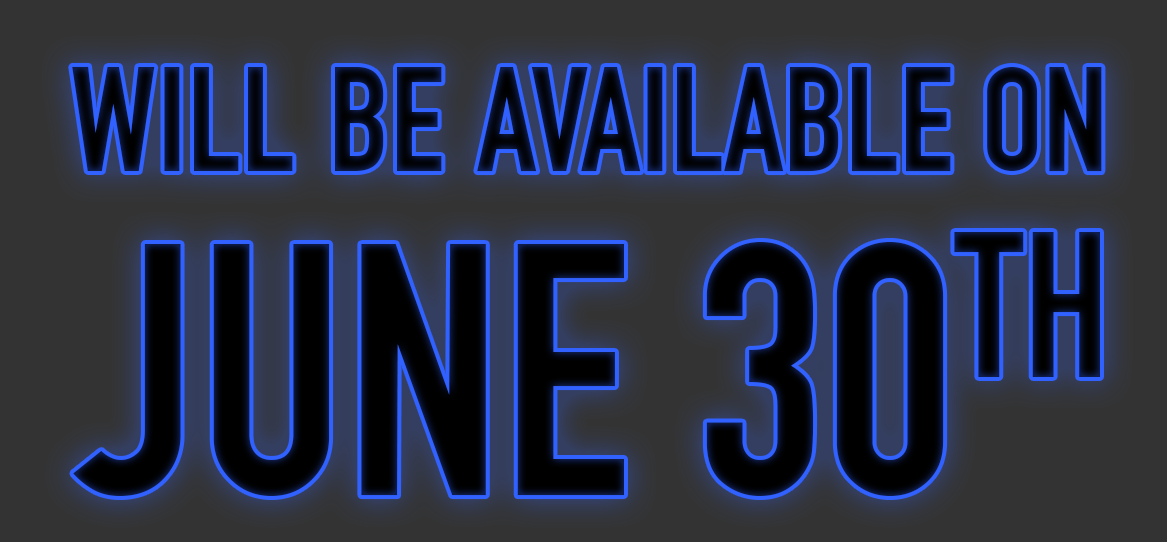
<style>
.page{position:relative;width:1167px;height:542px;background:#333333}
.page>*{position:absolute;margin:0}
.t1{font:145.8px "DINEngschrift";text-transform:uppercase}
.t2{font:350.4px "DINEngschrift";color:#000102;text-transform:uppercase}
</style>
<div class="page">
<p class="t1" style="left:72px;top:66px;width:1030px;height:106px">will be available on</p>
<p class="t2" style="left:73px;top:232px;width:1027px;height:264px">JUNE 30TH</p>
</div>
